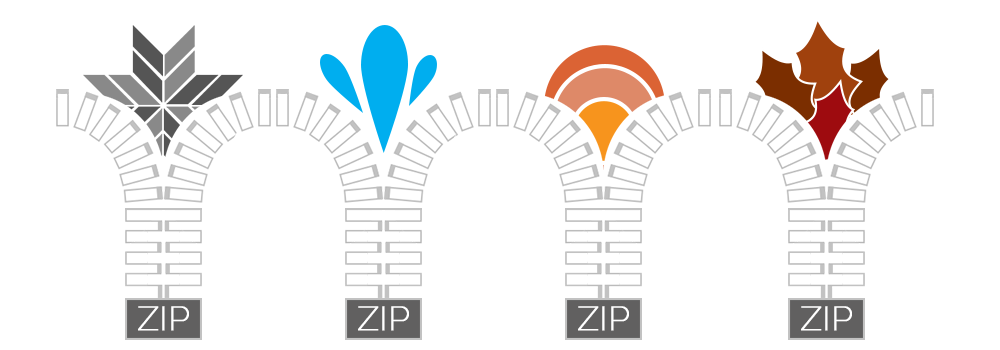
<style>
.page{position:relative;width:1000px;height:350px;background:#ffffff}
.page>*{position:absolute;margin:0}
.t1{font:33.1px "Raleway-ExtraLight";color:#ffffff;text-transform:uppercase;font-weight:bold}
</style>
<div class="page">
<p class="t1" style="left:138px;top:306px;width:51px;height:25px">zip</p>
<p class="t1" style="left:358px;top:306px;width:51px;height:25px">zip</p>
<p class="t1" style="left:578px;top:306px;width:51px;height:25px">zip</p>
<p class="t1" style="left:801px;top:306px;width:51px;height:25px">zip</p>
</div>
